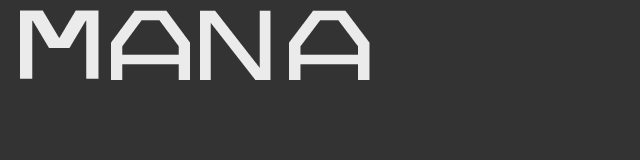
<style>
.page{position:relative;width:640px;height:160px;background:#333333}
.page>*{position:absolute;margin:0}
.t1{font:78px "7THDR2020Regular";color:#ebebeb;scale:1.15 1}
.t2{font:78px "7THDR2020ThinRegular";color:#ebebeb;font-weight:bold;scale:1.06 1}
.t3{font:78px "7THDR2020ThinRegular";letter-spacing:0.12em;color:#ebebeb;font-weight:bold}
.t4{font:78px "7THDR2020ThinRegular";letter-spacing:0.12em;color:#ebebeb;font-weight:bold;scale:1.08 1}
</style>
<div class="page">
<p class="t1" style="left:20px;top:10px;width:350px;height:70px">M<span class="t2">A</span><span class="t3">N</span><span class="t4">A</span></p>
</div>
